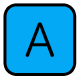
<style>
.page{position:relative;width:80px;height:80px;background:#03a9f4}
.page>*{position:absolute;margin:0}
.t1{font:48px "NanumSquareRoundR";color:#000000}
</style>
<div class="page">
<p class="t1" style="left:25px;top:22px;width:29px;height:35px">A</p>
</div>
